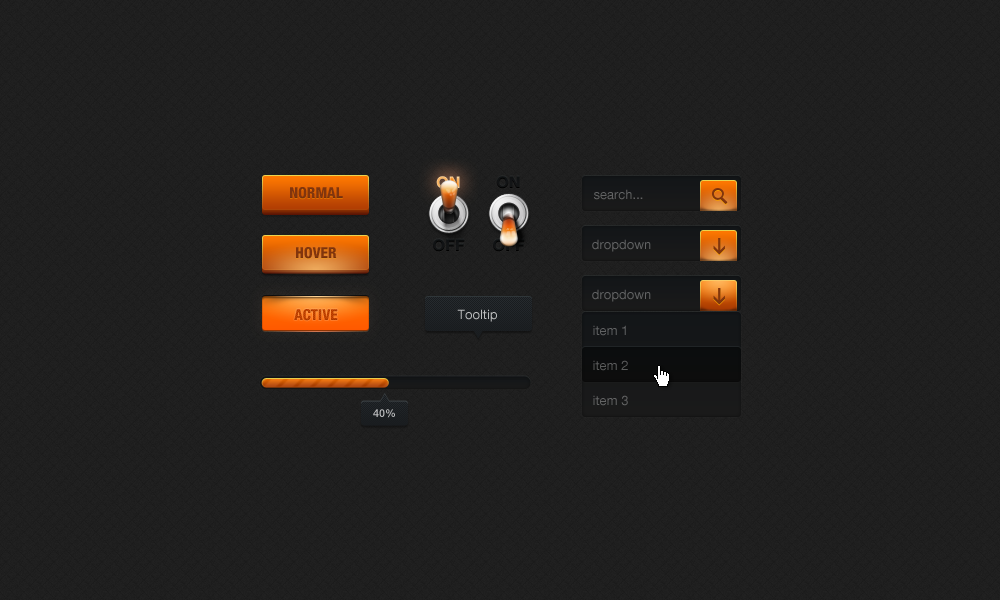
<style>
.page{position:relative;width:1000px;height:600px;background:#1e1e1e}
.page>*{position:absolute;margin:0}
.t1{font:16px "HelveticaNeueLTCom-Hv"}
.t2{font:16px "HelveticaNeueLTCom-Hv";color:#111315}
.t3{font:15px "HelveticaNeueLTCom-HvCn";color:#82350d}
.t4{font:13px "HelveticaNeueLTCom-Roman";color:#636364}
.t5{font:16px "HelveticaNeueLTCom-Hv";color:#101214}
.t6{font:13px "HelveticaNeueLTCom-Roman";color:#626364}
.t7{font:15px "HelveticaNeueLTCom-HvCn";color:#b73d00}
.t8{font:13px "HelveticaNeueLTCom-Roman";color:#bcbdbe}
.t9{font:13px "HelveticaNeueLTCom-Roman";color:#616263}
.t10{font:13px "HelveticaNeueLTCom-Roman";color:#5b5c5c}
.t11{font:13px "HelveticaNeueLTCom-Roman";color:#646565}
.t12{font:11px "HelveticaNeueLTCom-Md";color:#bdbebf}
</style>
<div class="page">
<p class="t1" style="left:436px;top:176px;width:24px;height:13px">ON</p>
<p class="t2" style="left:496px;top:176px;width:24px;height:13px">ON</p>
<p class="t3" style="left:290px;top:187px;width:53px;height:12px">NORMAL</p>
<p class="t4" style="left:594px;top:189px;width:49px;height:11px">search...</p>
<p class="t5" style="left:433px;top:239px;width:32px;height:13px">OFF</p>
<p class="t6" style="left:592px;top:239px;width:59px;height:13px">dropdown</p>
<p class="t3" style="left:296px;top:247px;width:41px;height:12px">HOVER</p>
<p class="t6" style="left:592px;top:289px;width:59px;height:13px">dropdown</p>
<p class="t7" style="left:294px;top:309px;width:44px;height:12px">ACTIVE</p>
<p class="t8" style="left:457px;top:309px;width:40px;height:13px">Tooltip</p>
<p class="t9" style="left:593px;top:325px;width:33px;height:11px">item 1</p>
<p class="t10" style="left:593px;top:360px;width:35px;height:11px">item 2</p>
<p class="t11" style="left:593px;top:395px;width:35px;height:11px">item 3</p>
<p class="t12" style="left:373px;top:409px;width:22px;height:9px">40%</p>
</div>
